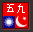
<style>
.page{position:relative;width:33px;height:32px;background:#f20000}
.page>*{position:absolute;margin:0}
.t1{font:10.4px "SimSun";color:#ffffff}
</style>
<div class="page">
<p class="t1" style="left:7px;top:4px;width:18px;height:9px">五九</p>
</div>
